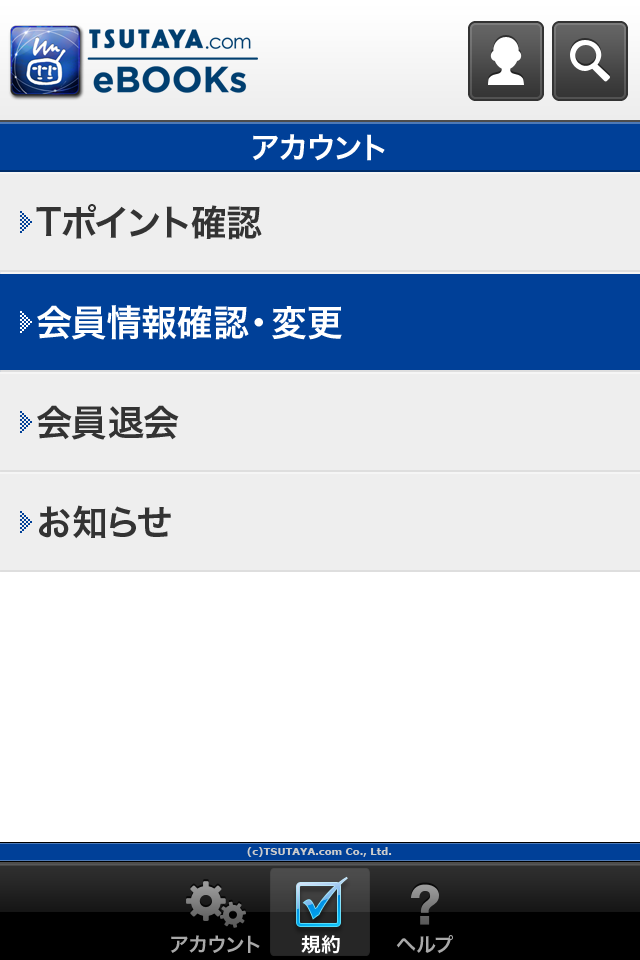
<style>
.page{position:relative;width:640px;height:960px;background:#ffffff}
.page>*{position:absolute;margin:0}
.t1{font:30px "HiraKakuPro-W6";color:#ffffff}
.t2{font:36px "HiraKakuPro-W6";color:#333333}
.t3{font:36px "HiraKakuPro-W6";color:#ffffff}
.t4{font:10px "Verdana-Bold";color:#cccccc}
.t5{font:20px "HiraKakuPro-W6";color:#a8a8a8}
.t6{font:20px "HiraKakuPro-W6";color:#ffffff}
</style>
<div class="page">
<p class="t1" style="left:252px;top:134px;width:133px;height:27px">アカウント</p>
<p class="t2" style="left:36px;top:204px;width:226px;height:36px">Tポイント確認</p>
<p class="t3" style="left:37px;top:305px;width:305px;height:35px">会員情報確認・変更</p>
<p class="t3" style="left:37px;top:305px;width:305px;height:35px">会員情報確認・変更</p>
<p class="t2" style="left:37px;top:405px;width:142px;height:35px">会員退会</p>
<p class="t2" style="left:39px;top:505px;width:132px;height:34px">お知らせ</p>
<p class="t4" style="left:247px;top:847px;width:145px;height:10px">(c)TSUTAYA.com Co., Ltd.</p>
<p class="t5" style="left:170px;top:935px;width:90px;height:18px">アカウント</p>
<p class="t6" style="left:301px;top:935px;width:39px;height:19px">規約</p>
<p class="t5" style="left:396px;top:935px;width:57px;height:19px">ヘルプ</p>
</div>
